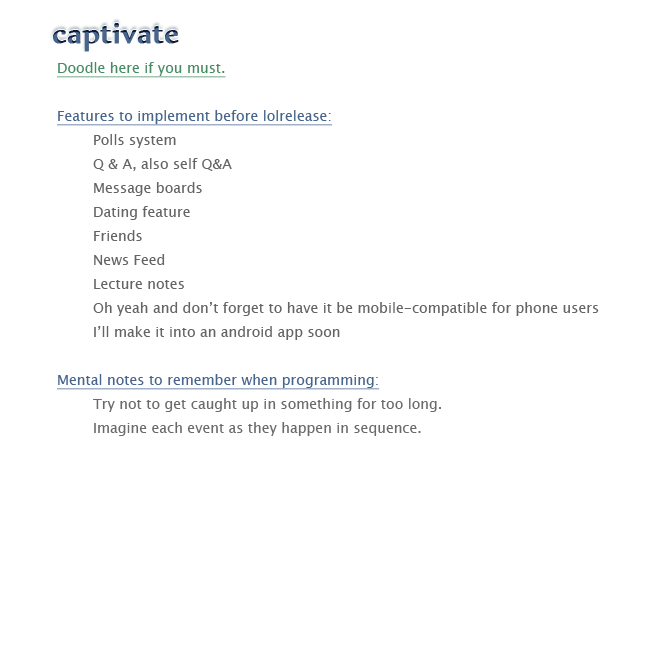
<style>
.page{position:relative;width:650px;height:650px;background:#ffffff}
.page>*{position:absolute;margin:0}
.t1{font:36px "Nyala-Regular";color:#46648c;font-weight:bold}
.t2{font:14px/24px "LucidaSansUnicode";color:#646464}
.t3{font:14px/24px "LucidaSansUnicode";color:#468c62;text-decoration:underline}
.t4{font:14px/24px "LucidaSansUnicode";color:#46648c;text-decoration:underline}
.t5{font:14px/24px "LucidaSansUnicode";color:#6a6a6a}
</style>
<div class="page">
<p class="t1" style="left:53px;top:23px;width:126px;height:29px">captivate</p>
<p class="t2" style="left:57px;top:62px;width:542px;height:374px"><span class="t3">Doodle here if you must.<br></span><span class="t4"><br>Features to implement before lolrelease:<br></span> Polls system<br> Q &amp; A, also self Q&amp;A<br> Message boards<br> Dating feature<br> Friends<br> News Feed<br> Lecture notes<br> Oh yeah and don’t forget to have it be mobile-compatible for phone users<br> I’ll make it into an android app soon<br><br><span class="t4">Mental notes to remember when programming:<br></span><span class="t5"> Try not to get caught up in something for too long.<br> Imagine each event as they happen in sequence.</span></p>
</div>
